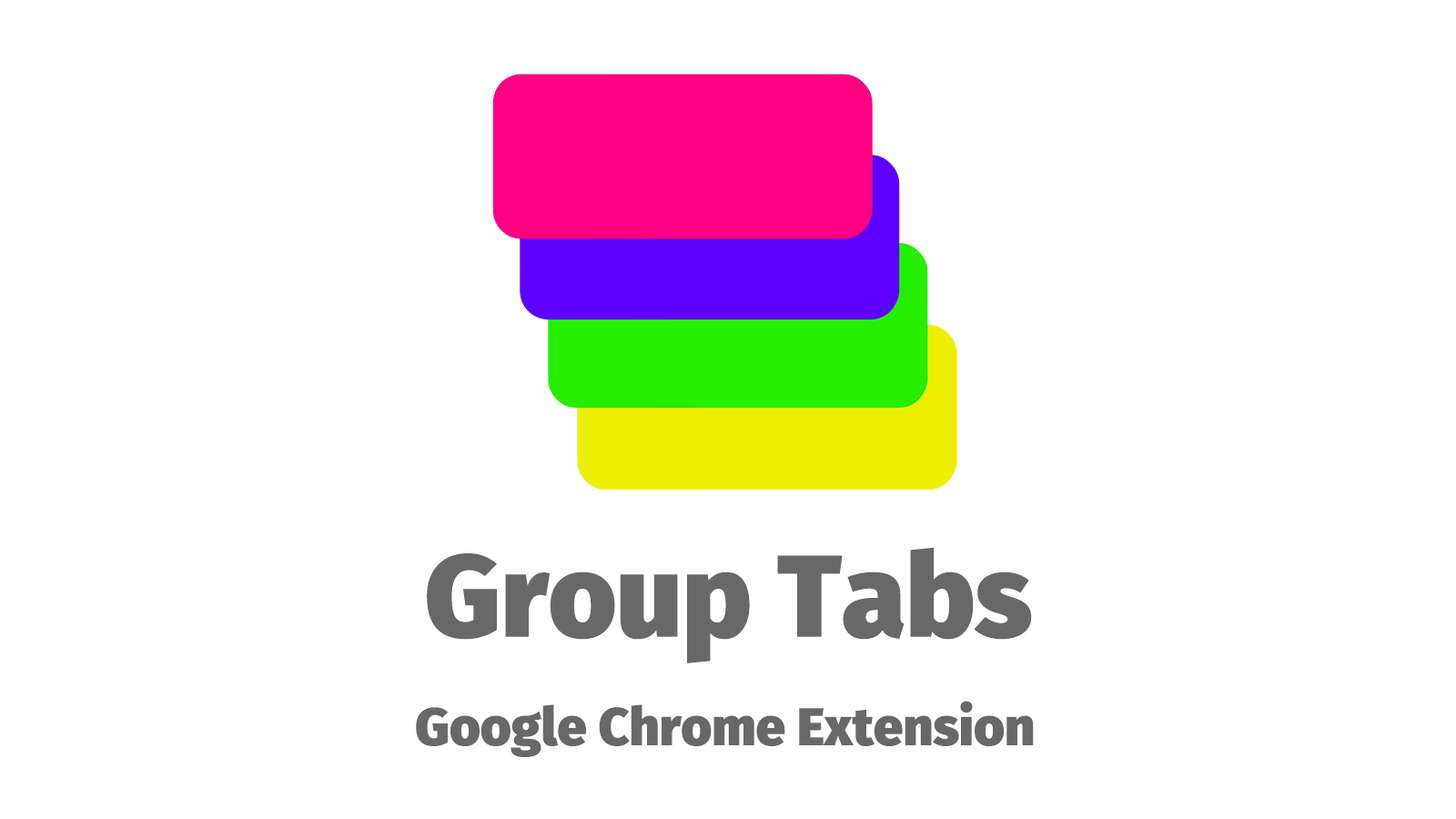
<style>
.page{position:relative;width:1456px;height:819px;background:#ffffff}
.page>*{position:absolute;margin:0}
.t1{font:116.5px "FiraSans-Heavy";color:#686868}
.t2{font:52.8px "FiraSans-Heavy";color:#686868}
</style>
<div class="page">
<p class="t1" style="left:427px;top:547px;width:605px;height:116px">Group Tabs</p>
<p class="t2" style="left:416px;top:701px;width:618px;height:56px">Google Chrome Extension</p>
</div>
